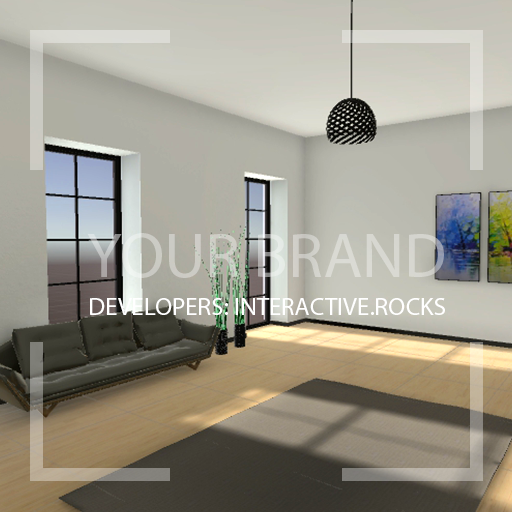
<style>
.page{position:relative;width:512px;height:512px}
.page>*{position:absolute;margin:0}
.t1{font:64px "MyriadPro-Regular";color:#d1d1ca}
.t2{font:25px "MyriadPro-Regular";color:#ffffff}
</style>
<div class="page">
<p class="t1" style="left:87px;top:233px;width:357px;height:45px">YOUR BRAND</p>
<p class="t2" style="left:90px;top:298px;width:355px;height:17px">DEVELOPERS: INTERACTIVE.ROCKS</p>
</div>
